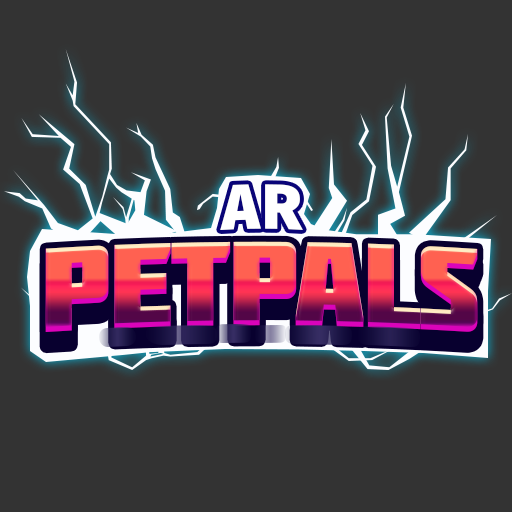
<style>
.page{position:relative;width:512px;height:512px;background:#333333}
.page>*{position:absolute;margin:0}
.t1{font:65px "FiraSans-Heavy";letter-spacing:0.05em;color:#ffffff;scale:0.96 1}
.t2{font:119px "Molot";letter-spacing:-0.025em}
</style>
<div class="page">
<p class="t1" style="left:220px;top:184px;width:83px;height:46px">AR</p>
<p class="t2" style="left:45px;top:241px;width:433px;height:91px">petpals</p>
</div>
